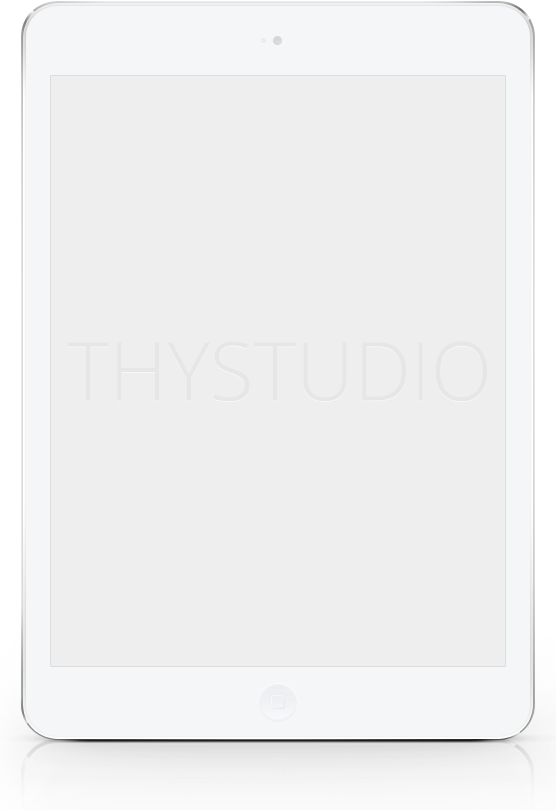
<style>
.page{position:relative;width:556px;height:810px;background:#eeeeee}
.page>*{position:absolute;margin:0}
.t1{font:80.8px "OpenSans-Light";color:#e6e6e6}
</style>
<div class="page">
<p class="t1" style="left:67px;top:341px;width:421px;height:61px">THYSTUDIO</p>
</div>
